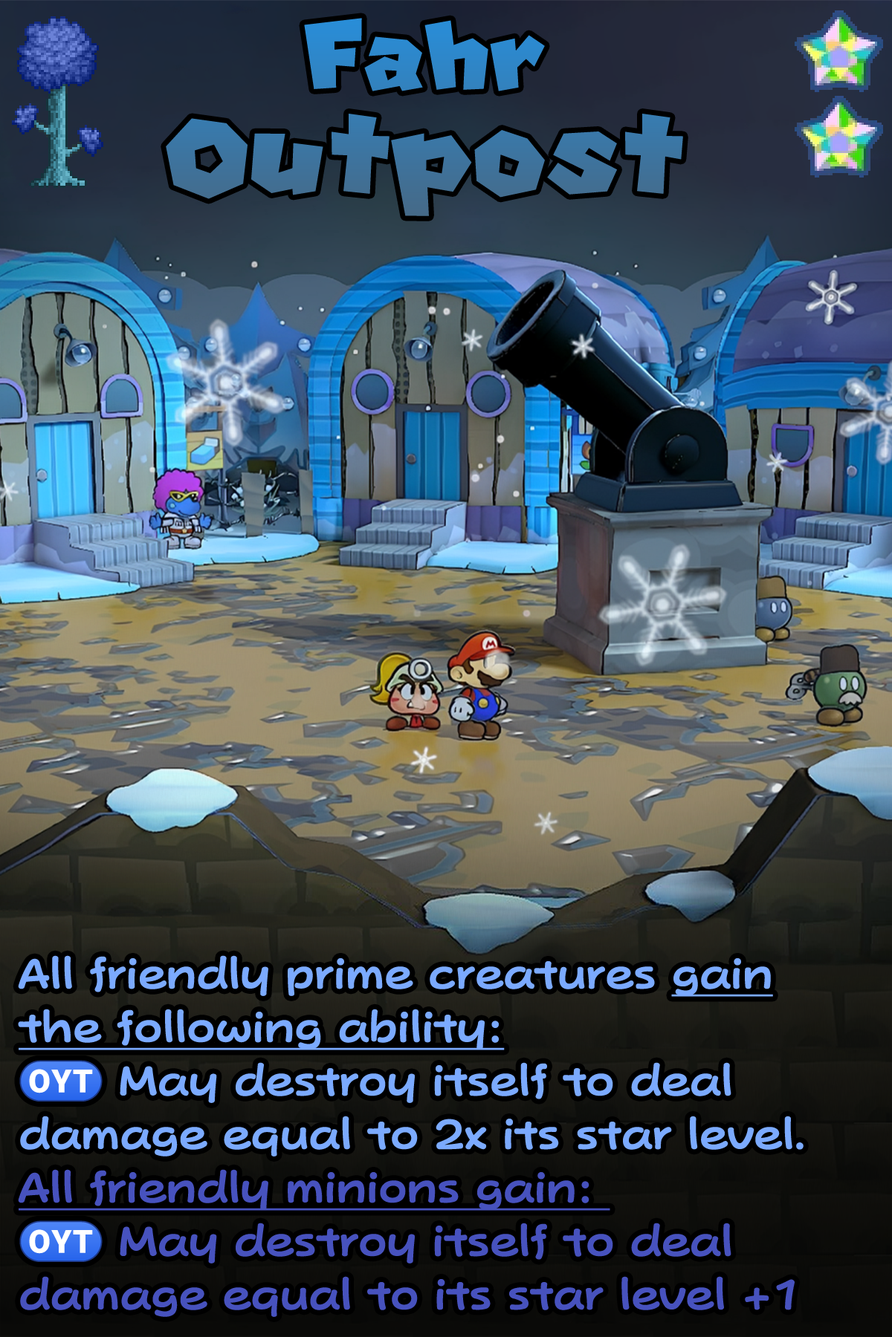
<style>
.page{position:relative;width:892px;height:1337px}
.page>*{position:absolute;margin:0}
.t1{font:272.7px/89.2px "SuperMario";color:#3c75a2}
.t2{font:226.6px/89.2px "SuperMario";color:#3c75a2}
.t3{font:72.1px/53.5px "PopJoyStd-B";color:#7baaff}
.t4{font:72.1px/53.5px "PopJoyStd-B";color:#7baaff;text-decoration:underline}
.t5{font:72.1px/53.5px "stoogedings-Regular";color:#7baaff}
.t6{font:72.1px/53.5px "PopJoyStd-B";color:#4752be;text-decoration:underline}
.t7{font:72.1px/53.5px "stoogedings-Regular";color:#4752be}
.t8{font:72.1px/53.5px "PopJoyStd-B";color:#4752be}
</style>
<div class="page">
<p class="t1" style="left:166px;top:18px;width:517px;height:198px;text-align:center"><span class="t2">Fahr<br></span>Outpost</p>
<p class="t3" style="left:18px;top:956px;width:785px;height:361px">All friendly prime creatures <span class="t4">gain the following ability:</span> <br><span class="t5">(OYT)</span> May destroy itself to deal damage equal to 2x its star level.<br><span class="t6">All friendly minions gain: <br></span><span class="t7">(OYT)</span><span class="t8"> May destroy itself to deal damage equal to its star level +1</span></p>
</div>
